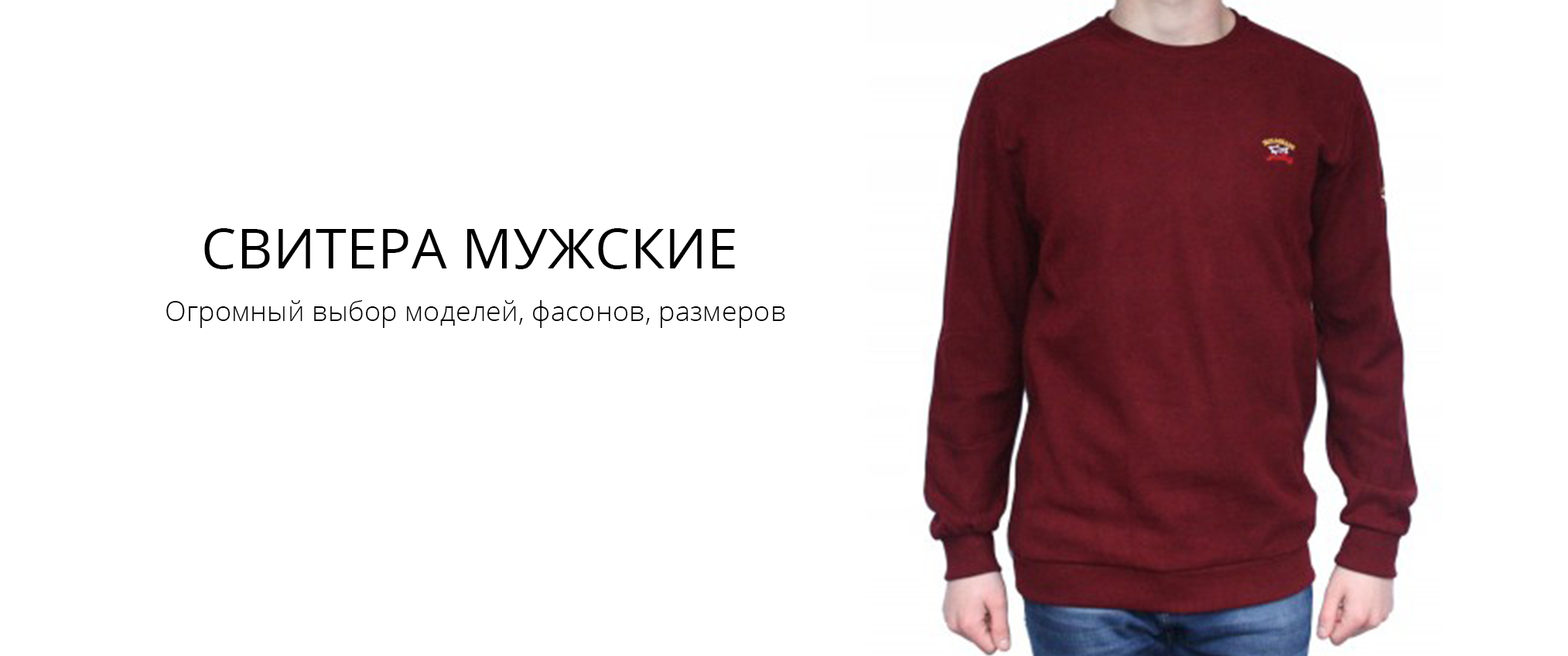
<style>
.page{position:relative;width:1568px;height:656px;background:#ffffff}
.page>*{position:absolute;margin:0}
.t1{font:55.7px "OpenSans";letter-spacing:0.005em;color:#000000}
.t2{font:27.8px "OpenSans-Light";letter-spacing:0.005em;color:#000000}
</style>
<div class="page">
<p class="t1" style="left:204px;top:228px;width:531px;height:41px">СВИТЕРА МУЖСКИЕ</p>
<p class="t2" style="left:166px;top:300px;width:619px;height:28px">Огромный выбор моделей, фасонов, размеров</p>
</div>
